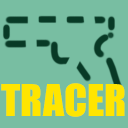
<style>
.page{position:relative;width:128px;height:128px;background:#78bea2}
.page>*{position:absolute;margin:0}
.t1{font:40.4px "Impact";color:#ffe500}
</style>
<div class="page">
<p class="t1" style="left:1px;top:83px;width:124px;height:34px">TRACER</p>
</div>
